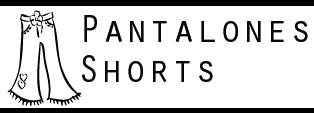
<style>
.page{position:relative;width:314px;height:113px;background:#ffffff}
.page>*{position:absolute;margin:0}
.t1{font:39px "OratorStd";color:#060808}
</style>
<div class="page">
<p class="t1" style="left:84px;top:15px;width:224px;height:27px">Pantalones</p>
<p class="t1" style="left:82px;top:55px;width:131px;height:27px">Shorts</p>
</div>
